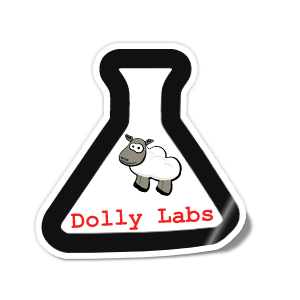
<style>
.page{position:relative;width:300px;height:300px;background:#ffffff}
.page>*{position:absolute;margin:0}
.t1{font:24px "CourierNewPS-BoldMT";color:#f30f0f}
</style>
<div class="page">
<p class="t1" style="left:71px;top:206px;width:142px;height:24px;rotate:-3deg">Dolly Labs</p>
</div>
